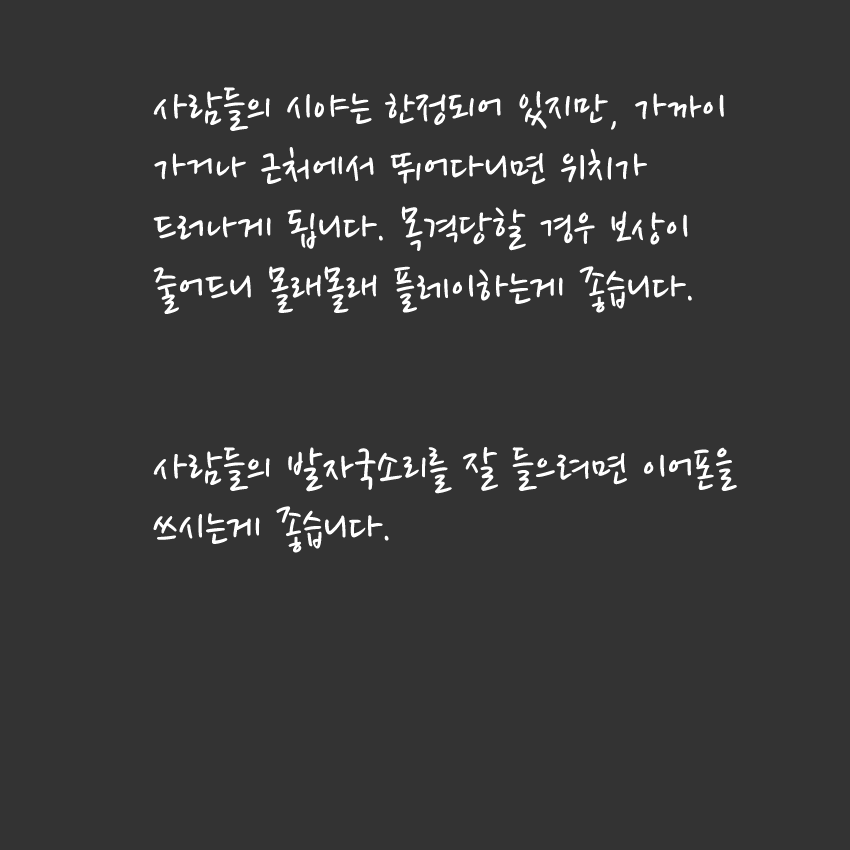
<style>
.page{position:relative;width:850px;height:850px;background:#333333}
.page>*{position:absolute;margin:0}
.t1{font:50px "NanumPen";color:#ffffff}
</style>
<div class="page">
<p class="t1" style="left:153px;top:87px;width:584px;height:466px">사람들의 시야는 한정되어 있지만, 가까이 가거나 근처에서 뛰어다니면 위치가 드러나게 됩니다. 목격당할 경우 보상이 줄어드니 몰래몰래 플레이하는게 좋습니다.<br><br><br>사람들의 발자국소리를 잘 들으려면 이어폰을 쓰시는게 좋습니다.</p>
</div>
